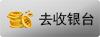
<style>
.page{position:relative;width:100px;height:37px}
.page>*{position:absolute;margin:0}
.t1{font:14px "SimHei";color:#000000}
</style>
<div class="page">
<p class="t1" style="left:39px;top:12px;width:55px;height:14px">去收银台</p>
</div>
